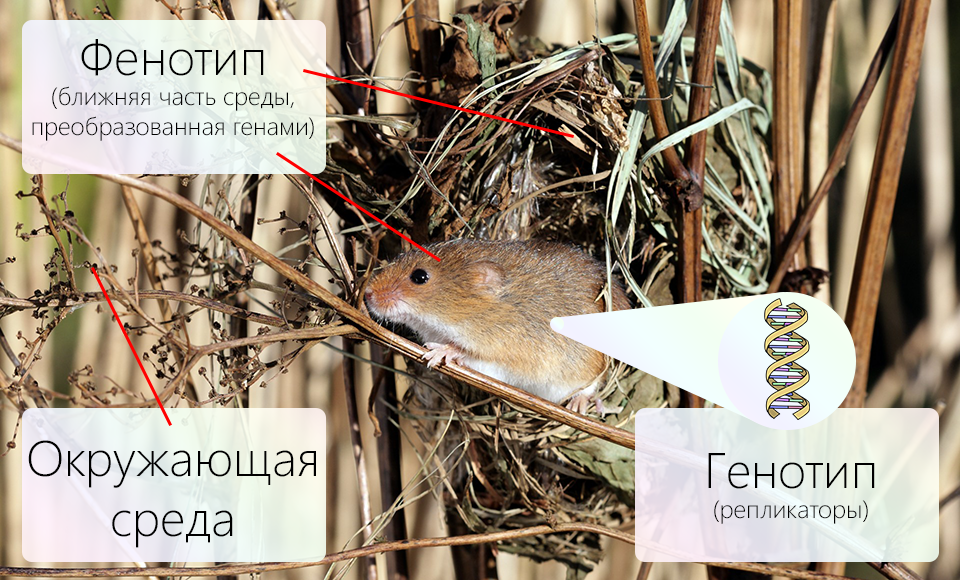
<style>
.page{position:relative;width:960px;height:580px}
.page>*{position:absolute;margin:0}
.t1{font:25px "SegoeUI-Light";color:#000000}
.t2{font:50px "SegoeUI-Light";color:#000000}
</style>
<div class="page">
<p class="t1" style="left:32px;top:39px;width:282px;height:102px;text-align:center"><span class="t2">Фенотип</span><br>(ближняя часть среды,<br>преобразованная генами)</p>
<p class="t2" style="left:28px;top:440px;width:288px;height:108px;text-align:center">Окружающая<br>среда</p>
<p class="t1" style="left:708px;top:453px;width:167px;height:71px;text-align:center"><span class="t2">Генотип<br></span>(репликаторы)</p>
</div>
